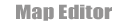
<style>
.page{position:relative;width:128px;height:24px;background:#ffffff}
.page>*{position:absolute;margin:0}
.t1{font:18px "Impact";color:#959494;scale:1.25 1}
</style>
<div class="page">
<p class="t1" style="left:16px;top:4px;width:96px;height:17px">Map Editor</p>
</div>
